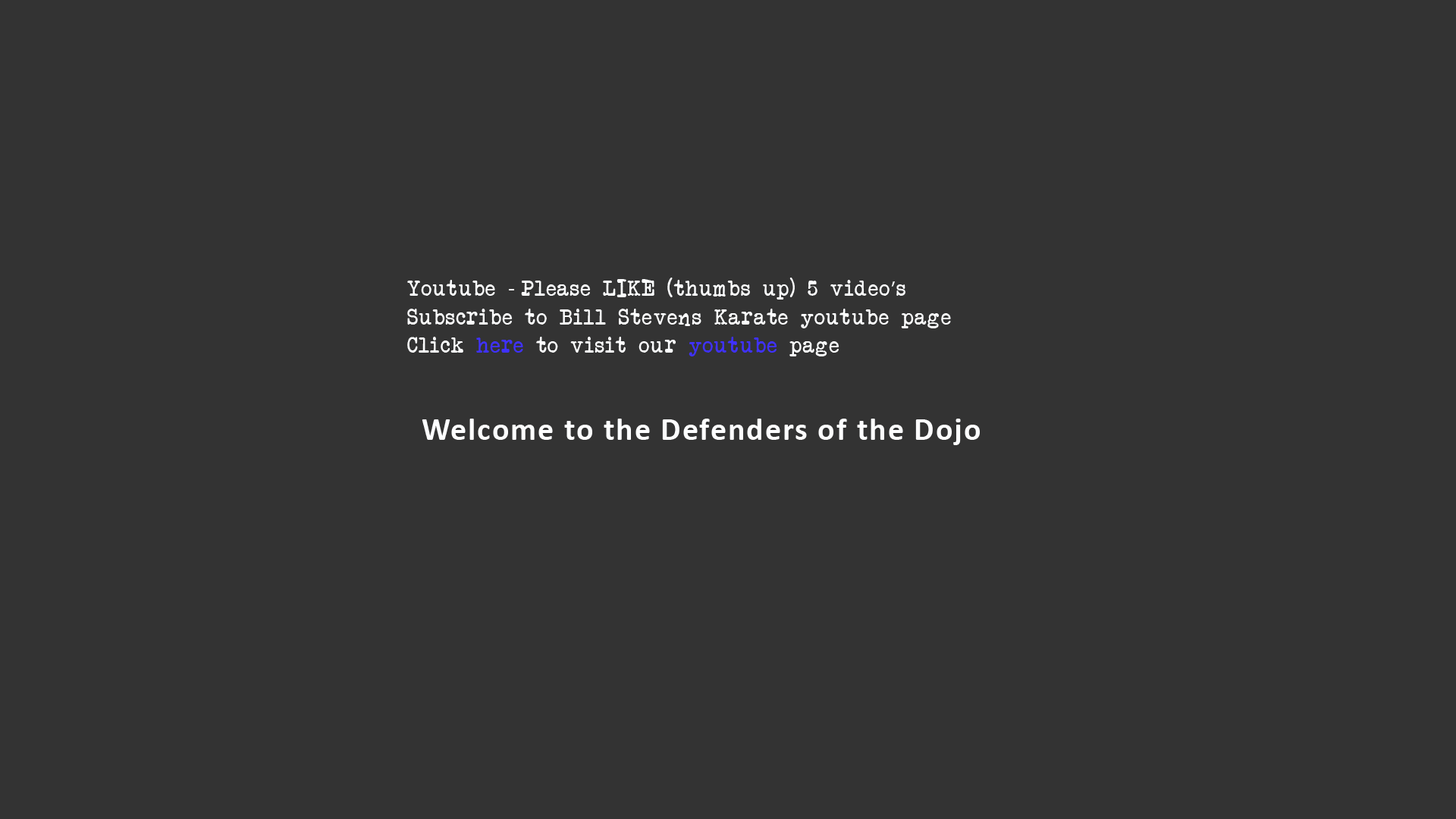
<style>
.page{position:relative;width:1456px;height:819px;background:#333333}
.page>*{position:absolute;margin:0}
.t1{font:21.3px/28.4px "AnotherTypewriter";letter-spacing:0.05em;color:#fdfeff}
.t2{font:21.3px/28.4px "MyriadPro-Regular";letter-spacing:0.05em;color:#fdfeff}
.t3{font:21.3px/28.4px "AnotherTypewriter";letter-spacing:0.05em;color:#3f31fe}
.t4{font:31.6px "Calibri-Bold";letter-spacing:0.05em;color:#fdfeff}
</style>
<div class="page">
<p class="t1" style="left:407px;top:278px;width:544px;height:78px">Youtube <span class="t2">- </span>Please LIKE (thumbs up) 5 video<span class="t2">’</span>s<br>Subscribe to Bill Stevens Karate youtube page<br>Click <span class="t3">here </span>to visit our <span class="t3">youtube </span>page</p>
<p class="t4" style="left:422px;top:419px;width:558px;height:26px">Welcome to the Defenders of the Dojo</p>
</div>
